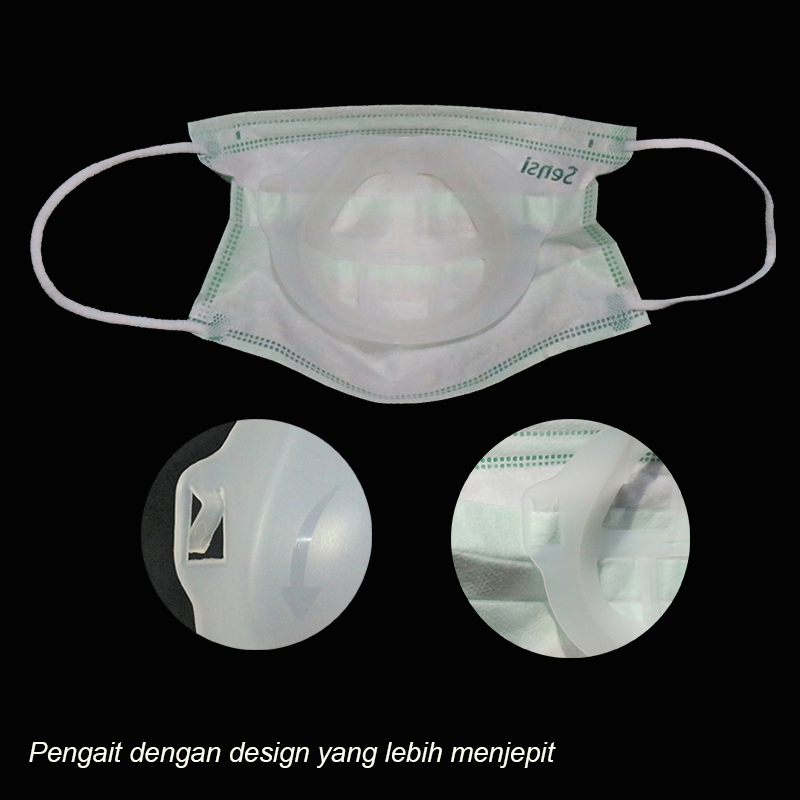
<style>
.page{position:relative;width:800px;height:800px;background:#030303}
.page>*{position:absolute;margin:0}
.t1{font:27.5px "Arial-ItalicMT";color:#fbfbf0}
</style>
<div class="page">
<p class="t1" style="left:29px;top:742px;width:527px;height:26px">Pengait dengan design yang lebih menjepit</p>
</div>
